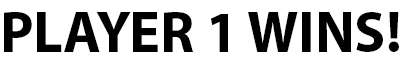
<style>
.page{position:relative;width:400px;height:65px;background:#ffffff}
.page>*{position:absolute;margin:0}
.t1{font:58px "MyriadPro-Bold";color:#000000}
</style>
<div class="page">
<p class="t1" style="left:4px;top:12px;width:395px;height:40px">PLAYER 1 WINS!</p>
</div>
